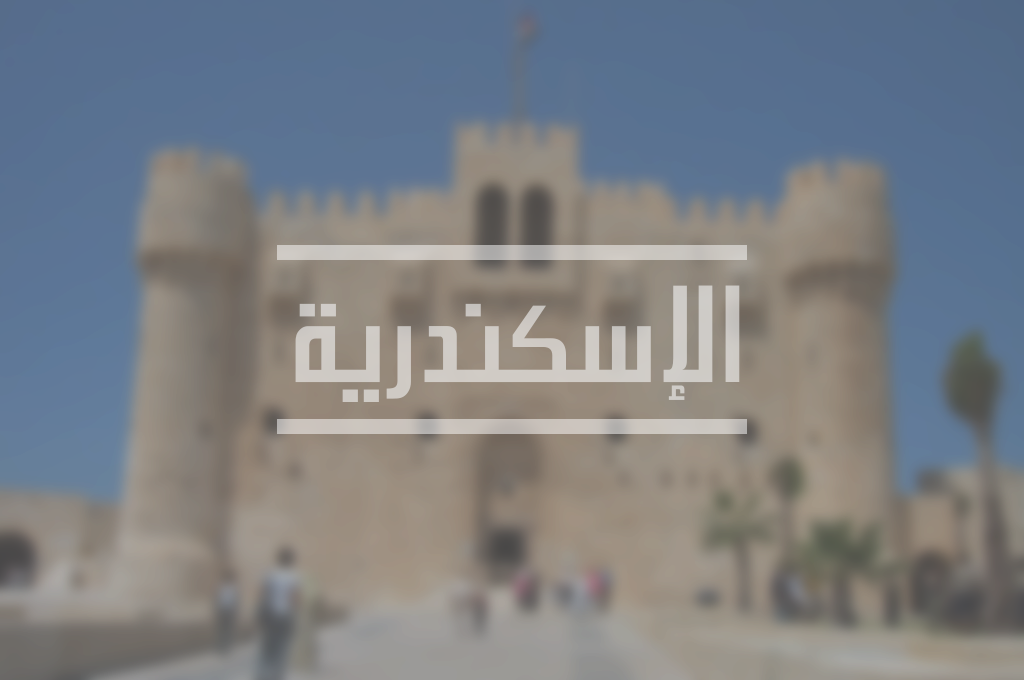
<style>
.page{position:relative;width:1024px;height:680px}
.page>*{position:absolute;margin:0}
.t1{font:136px "SC_SHARJAH";color:#cfcbc5}
</style>
<div class="page">
<p class="t1" style="left:295px;top:285px;width:445px;height:117px">الإسكندرية</p>
</div>
